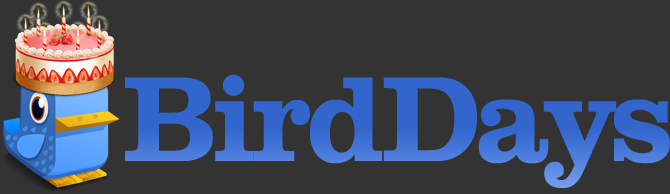
<style>
.page{position:relative;width:670px;height:194px;background:#333333}
.page>*{position:absolute;margin:0}
.t1{font:125px "Clarendon";letter-spacing:-0.05em;color:#3366cc}
</style>
<div class="page">
<p class="t1" style="left:125px;top:74px;width:545px;height:114px">BirdDays</p>
</div>
